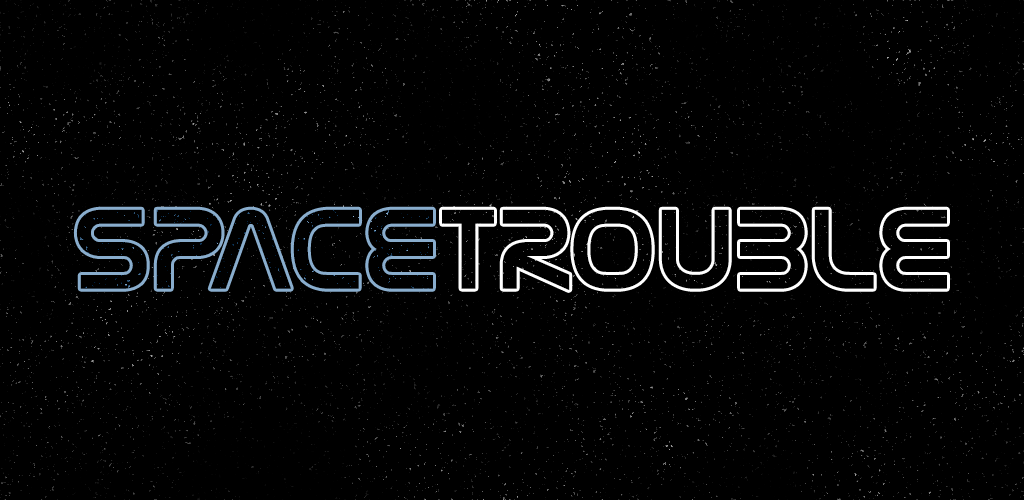
<style>
.page{position:relative;width:1024px;height:500px;background:#000000}
.page>*{position:absolute;margin:0}
.t1{font:114.6px "NasalizationRg-Regular";color:#000000}
</style>
<div class="page">
<p class="t1" style="left:76px;top:209px;width:871px;height:81px">SPACETROUBLE</p>
<p class="t1" style="left:76px;top:209px;width:357px;height:80px">SPACE</p>
<p class="t1" style="left:442px;top:209px;width:505px;height:81px">TROUBLE</p>
</div>
